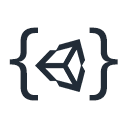
<style>
.page{position:relative;width:128px;height:128px;background:#ffffff}
.page>*{position:absolute;margin:0}
.t1{font:80.4px "Consolas";color:#222c37}
</style>
<div class="page">
<p class="t1" style="left:9px;top:27px;width:29px;height:74px">{</p>
<p class="t1" style="left:89px;top:27px;width:29px;height:74px">}</p>
</div>
